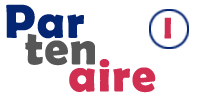
<style>
.page{position:relative;width:200px;height:100px;background:#ffffff}
.page>*{position:absolute;margin:0}
.t1{font:48px "BerlinSansFBDemi-Bold";letter-spacing:0.025em;color:#052673}
.t2{font:30px "BerlinSansFBDemi-Bold";letter-spacing:0.025em;color:#d02f52}
.t3{font:48px "BerlinSansFBDemi-Bold";letter-spacing:0.025em;color:#575757}
.t4{font:48px "BerlinSansFBDemi-Bold";letter-spacing:0.025em;color:#d02f52}
</style>
<div class="page">
<p class="t1" style="left:6px;top:4px;width:78px;height:35px">Par</p>
<p class="t2" style="left:164px;top:17px;width:7px;height:22px">I</p>
<p class="t3" style="left:25px;top:33px;width:70px;height:33px">ten</p>
<p class="t4" style="left:69px;top:59px;width:87px;height:34px">aire</p>
</div>
